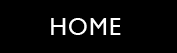
<style>
.page{position:relative;width:177px;height:53px;background:#000000}
.page>*{position:absolute;margin:0}
.t1{font:24px "GillSans";letter-spacing:0.05em;color:#ffffff}
</style>
<div class="page">
<p class="t1" style="left:51px;top:18px;width:70px;height:17px">HOME</p>
</div>
